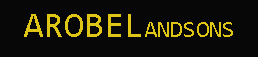
<style>
.page{position:relative;width:258px;height:57px;background:#070707}
.page>*{position:absolute;margin:0}
.t1{font:24px "Consolas";color:#dfc516}
.t2{font:36px "Consolas";color:#dfc516}
</style>
<div class="page">
<p class="t1" style="left:24px;top:14px;width:209px;height:23px"><span class="t2">AROBEL</span>ANDSONS</p>
</div>
